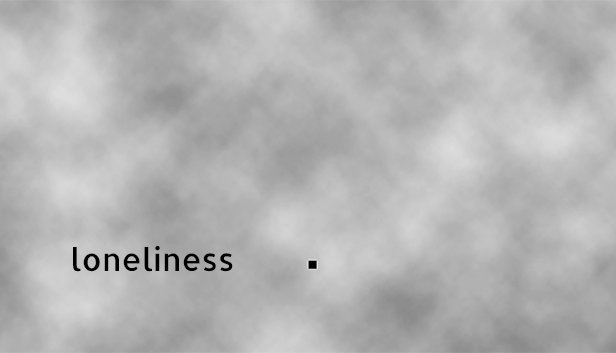
<style>
.page{position:relative;width:616px;height:353px}
.page>*{position:absolute;margin:0}
.t1{font:31.4px "Allerta-Regular";color:#000000}
</style>
<div class="page">
<p class="t1" style="left:73px;top:246px;width:160px;height:26px">loneliness</p>
</div>
